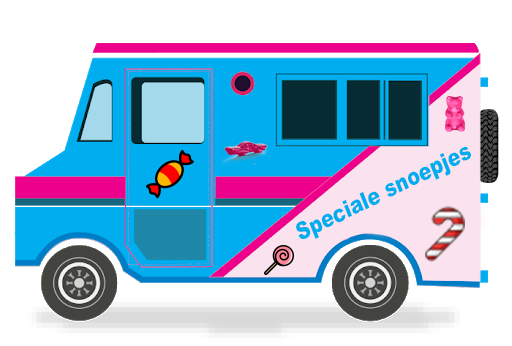
<style>
.page{position:relative;width:512px;height:346px;background:#ffffff}
.page>*{position:absolute;margin:0}
.t1{font:24px "Arial-Black";color:#00aeef;scale:0.81 1}
</style>
<div class="page">
<p class="t1" style="left:296px;top:146px;width:175px;height:93px;rotate:-26deg">Speciale snoepjes</p>
</div>
